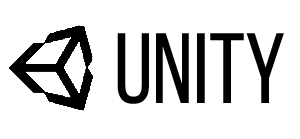
<style>
.page{position:relative;width:300px;height:139px;background:#ffffff}
.page>*{position:absolute;margin:0}
.t1{font:99.6px "BebasNeueRegular";color:#000000}
</style>
<div class="page">
<p class="t1" style="left:117px;top:33px;width:167px;height:71px">UNITY</p>
</div>
